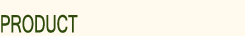
<style>
.page{position:relative;width:245px;height:36px;background:#fff9ee}
.page>*{position:absolute;margin:0}
.t1{font:24px "MicrosoftSansSerif";color:#2e4b0c;scale:0.65 1}
</style>
<div class="page">
<p class="t1" style="left:1px;top:14px;width:77px;height:19px">PRODUCT</p>
</div>
